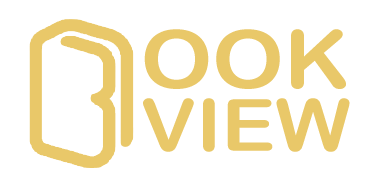
<style>
.page{position:relative;width:374px;height:186px;background:#ffffff}
.page>*{position:absolute;margin:0}
.t1{font:80.7px "ArialRoundedMTBold";color:#e9c869;text-transform:uppercase;scale:1.12 1}
.t2{font:72.1px "ArialRoundedMTBold";color:#e9c869;text-transform:uppercase;scale:1.12 1}
</style>
<div class="page">
<p class="t1" style="left:144px;top:29px;width:202px;height:60px">OOK</p>
<p class="t2" style="left:143px;top:98px;width:207px;height:54px">View</p>
</div>
